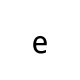
<style>
.page{position:relative;width:80px;height:80px;background:#ffffff}
.page>*{position:absolute;margin:0}
.t1{font:31.8px "DroidSans";color:#000000}
</style>
<div class="page">
<p class="t1" style="left:33px;top:36px;width:14px;height:18px">e</p>
</div>
